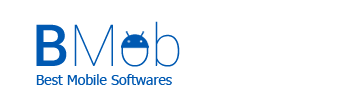
<style>
.page{position:relative;width:360px;height:100px;background:#ffffff}
.page>*{position:absolute;margin:0}
.t1{font:14px "Tahoma";color:#0059b2}
</style>
<div class="page">
<p class="t1" style="left:36px;top:74px;width:136px;height:11px">Best Mobile Softwares</p>
</div>
